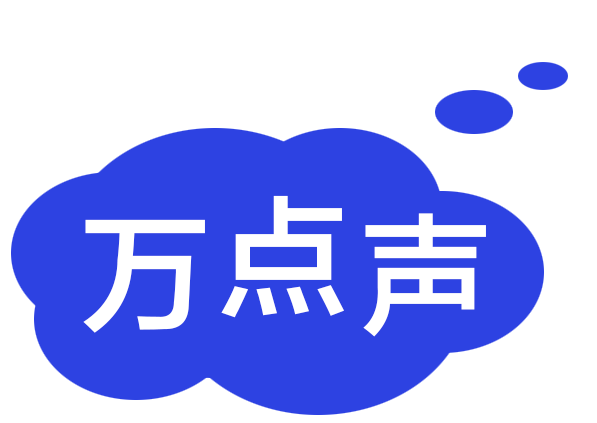
<style>
.page{position:relative;width:597px;height:423px;background:#ffffff}
.page>*{position:absolute;margin:0}
.t1{font:130px "FZLTZHK--GBK1-0";color:#ffffff;text-transform:uppercase}
</style>
<div class="page">
<p class="t1" style="left:221px;top:195px;width:123px;height:123px">点</p>
<p class="t1" style="left:83px;top:219px;width:122px;height:114px">万</p>
<p class="t1" style="left:363px;top:213px;width:123px;height:124px">声</p>
</div>
